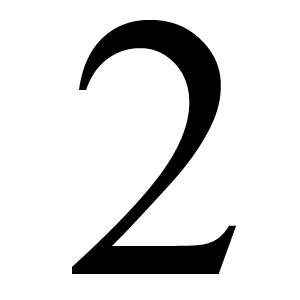
<style>
.page{position:relative;width:300px;height:300px;background:#ffffff}
.page>*{position:absolute;margin:0}
.t1{font:375px "TimesNewRomanPSMT";color:#000000}
</style>
<div class="page">
<p class="t1" style="left:72px;top:20px;width:164px;height:254px">2</p>
</div>
